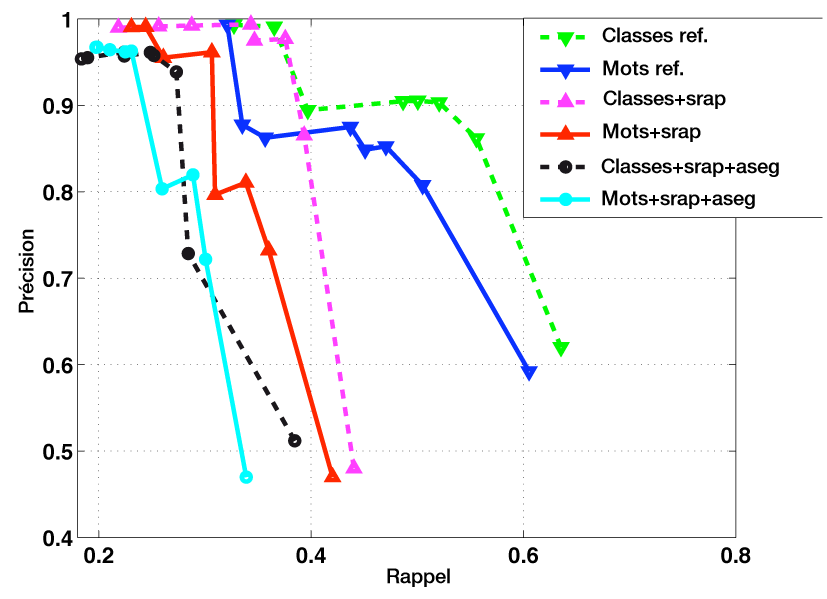
<style>
.page{position:relative;width:827px;height:599px;background:#ffffff}
.page>*{position:absolute;margin:0}
.t1{font:20px "HelveticaNeue65Medium";color:#000000}
</style>
<div class="page">
<p class="t1" style="left:602px;top:27px;width:105px;height:16px">Classes ref.</p>
<p class="t1" style="left:603px;top:60px;width:80px;height:16px">Mots ref.</p>
<p class="t1" style="left:603px;top:90px;width:123px;height:19px">Classes+srap</p>
<p class="t1" style="left:603px;top:123px;width:98px;height:19px">Mots+srap</p>
<p class="t1" style="left:601px;top:158px;width:178px;height:19px">Classes+srap+aseg</p>
<p class="t1" style="left:602px;top:190px;width:153px;height:19px">Mots+srap+aseg</p>
<p class="t1" style="left:18px;top:229px;width:16px;height:84px;rotate:180deg">Précision</p>
</div>
